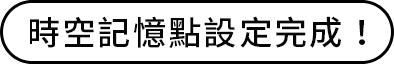
<style>
.page{position:relative;width:394px;height:64px;background:#ffffff}
.page>*{position:absolute;margin:0}
.t1{font:33.3px "NotoSansCJKtc-Medium";letter-spacing:0.06em;color:#060606}
</style>
<div class="page">
<p class="t1" style="left:29px;top:16px;width:336px;height:33px">時空記憶點設定完成！</p>
</div>
